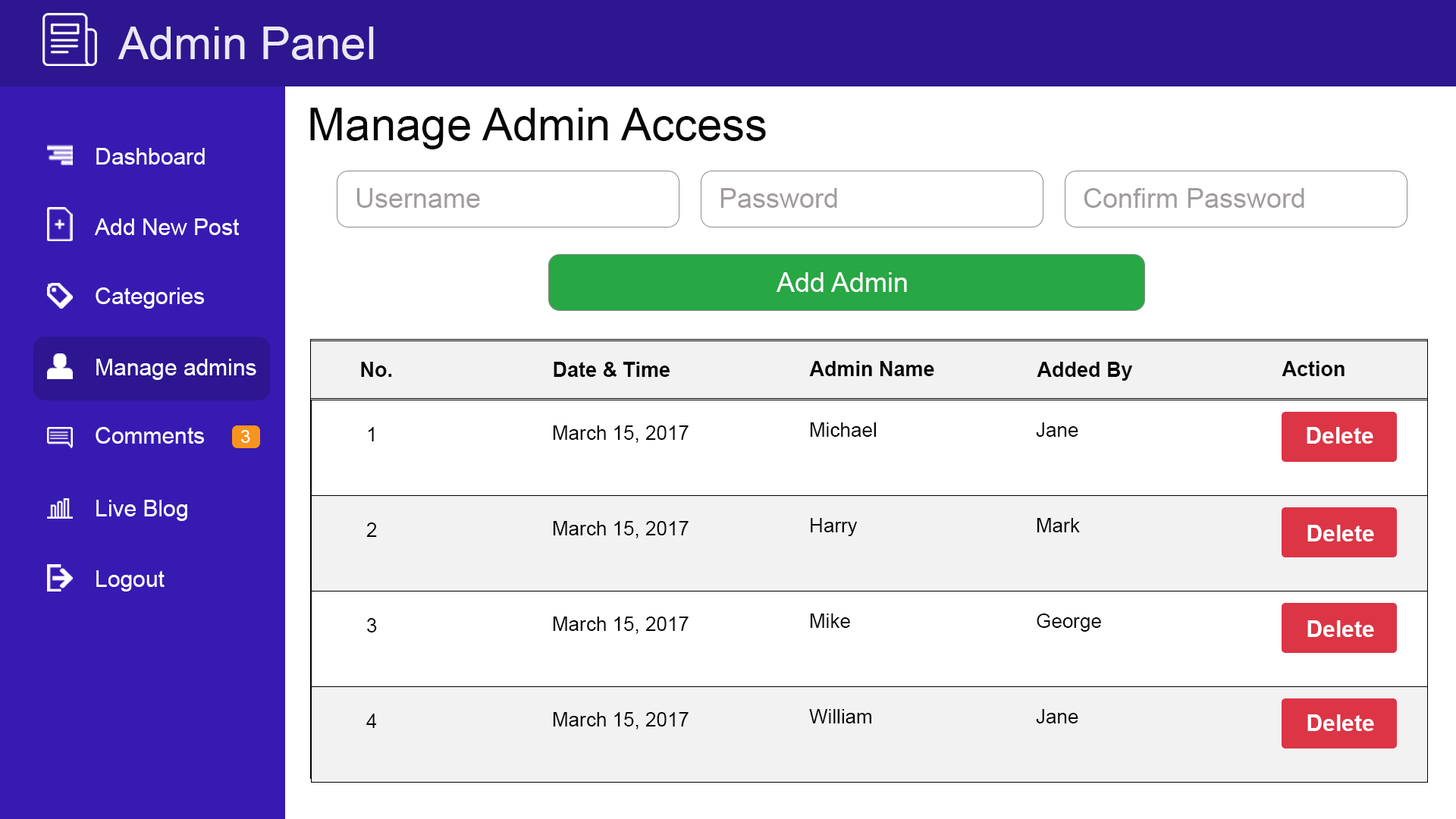
<style>
.page{position:relative;width:1456px;height:819px;background:#ffffff}
.page>*{position:absolute;margin:0}
.t1{font:45.5px "ArialMT";color:#eae8f4}
.t2{font:45.5px "ArialMT";color:#060606}
.t3{font:22.7px "ArialMT";color:#ffffff}
.t4{font:27.3px "ArialMT";color:#a19c9c}
.t5{font:27.3px "ArialMT";color:#ffffff}
.t6{font:20.5px "Arial-BoldMT";color:#060606}
.t7{font:19.7px "ArialMT";color:#060606}
.t8{font:18.2px "ArialMT";color:#ffffff}
.t9{font:22.7px "Arial-BoldMT";color:#ffffff}
</style>
<div class="page">
<p class="t1" style="left:118px;top:27px;width:256px;height:33px">Admin Panel</p>
<p class="t2" style="left:310px;top:108px;width:456px;height:41px">Manage Admin Access</p>
<p class="t3" style="left:96px;top:148px;width:109px;height:17px">Dashboard</p>
<p class="t4" style="left:356px;top:188px;width:124px;height:20px">Username</p>
<p class="t4" style="left:720px;top:188px;width:117px;height:20px">Password</p>
<p class="t4" style="left:1084px;top:188px;width:220px;height:20px">Confirm Password</p>
<p class="t3" style="left:94px;top:218px;width:145px;height:17px">Add New Post</p>
<p class="t5" style="left:777px;top:272px;width:130px;height:20px">Add Admin</p>
<p class="t3" style="left:96px;top:287px;width:108px;height:22px">Categories</p>
<p class="t3" style="left:96px;top:359px;width:160px;height:21px">Manage admins</p>
<p class="t6" style="left:361px;top:362px;width:31px;height:15px">No.</p>
<p class="t6" style="left:554px;top:362px;width:116px;height:15px">Date &amp; Time</p>
<p class="t6" style="left:809px;top:361px;width:125px;height:15px">Admin Name</p>
<p class="t6" style="left:1037px;top:362px;width:96px;height:19px">Added By</p>
<p class="t6" style="left:1282px;top:361px;width:63px;height:15px">Action</p>
<p class="t7" style="left:553px;top:425px;width:136px;height:18px">March 15, 2017</p>
<p class="t7" style="left:810px;top:422px;width:66px;height:15px">Michael</p>
<p class="t7" style="left:1036px;top:422px;width:42px;height:15px">Jane Doe</p>
<p class="t3" style="left:96px;top:427px;width:108px;height:17px">Comments</p>
<p class="t8" style="left:241px;top:430px;width:9px;height:13px">3</p>
<p class="t7" style="left:368px;top:427px;width:6px;height:14px">1</p>
<p class="t9" style="left:1307px;top:427px;width:66px;height:17px">Delete</p>
<p class="t3" style="left:96px;top:500px;width:91px;height:21px">Live Blog</p>
<p class="t7" style="left:553px;top:521px;width:136px;height:17px">March 15, 2017</p>
<p class="t7" style="left:811px;top:518px;width:47px;height:18px">Harry</p>
<p class="t7" style="left:1037px;top:518px;width:43px;height:14px">Mark</p>
<p class="t7" style="left:366px;top:522px;width:11px;height:15px">2</p>
<p class="t9" style="left:1307px;top:525px;width:67px;height:16px">Delete</p>
<p class="t3" style="left:96px;top:570px;width:69px;height:21px">Logout</p>
<p class="t7" style="left:553px;top:617px;width:136px;height:17px">March 15, 2017</p>
<p class="t7" style="left:810px;top:613px;width:40px;height:15px">Mike</p>
<p class="t7" style="left:1037px;top:613px;width:64px;height:19px">George</p>
<p class="t7" style="left:367px;top:618px;width:10px;height:14px">3</p>
<p class="t9" style="left:1307px;top:620px;width:67px;height:17px">Delete</p>
<p class="t7" style="left:366px;top:714px;width:10px;height:14px">4</p>
<p class="t7" style="left:553px;top:712px;width:136px;height:18px">March 15, 2017</p>
<p class="t7" style="left:809px;top:709px;width:62px;height:14px">William</p>
<p class="t7" style="left:1036px;top:709px;width:42px;height:14px">Jane Doe</p>
<p class="t9" style="left:1307px;top:714px;width:67px;height:17px">Delete</p>
</div>
